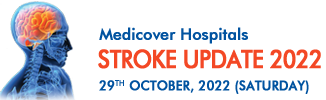
<style>
.page{position:relative;width:326px;height:100px;background:#ffffff}
.page>*{position:absolute;margin:0}
.t1{font:16.2px "FuturaBT-Medium";letter-spacing:-0.01em;color:#0153a0;font-weight:bold;scale:0.97 1}
.t2{font:25.1px "FuturaBT-Medium";letter-spacing:-0.04em;color:#f34825;text-transform:uppercase;font-weight:bold;scale:0.88 1}
.t3{font:13.7px "FuturaBT-Medium";color:#0153a0;text-transform:uppercase;font-weight:bold;scale:0.92 1}
</style>
<div class="page">
<p class="t1" style="left:99px;top:27px;width:149px;height:17px">Medicover Hospitals</p>
<p class="t2" style="left:98px;top:49px;width:223px;height:20px">stroke update 2022</p>
<p class="t3" style="left:99px;top:80px;width:210px;height:14px">29th October, 2022 (saturday)</p>
</div>
